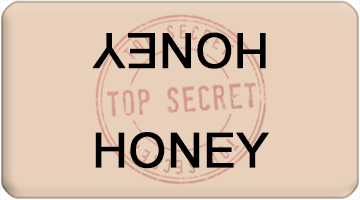
<style>
.page{position:relative;width:360px;height:200px;background:#e8d0bb}
.page>*{position:absolute;margin:0}
.t1{font:48px "ArialMT";color:#000000;font-weight:bold}
</style>
<div class="page">
<p class="t1" style="left:92px;top:32px;width:174px;height:37px;rotate:180deg">HONEY</p>
<p class="t1" style="left:95px;top:132px;width:174px;height:37px">HONEY</p>
</div>
